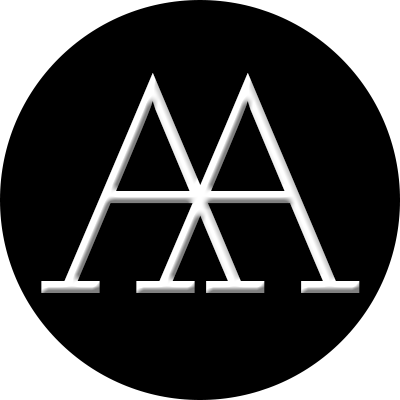
<style>
.page{position:relative;width:400px;height:400px;background:#000000}
.page>*{position:absolute;margin:0}
.t1{font:300px "JosefinSlab";letter-spacing:-0.48em;color:#ffffff}
</style>
<div class="page">
<p class="t1" style="left:41px;top:73px;width:319px;height:220px">AA</p>
</div>
